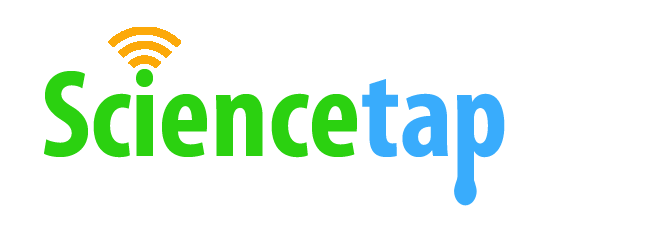
<style>
.page{position:relative;width:653px;height:244px;background:#ffffff}
.page>*{position:absolute;margin:0}
.t1{font:125px "MyriadPro-BoldCond";color:#2bd110}
.t2{font:125px "MyriadPro-BoldCond";color:#39acfc}
</style>
<div class="page">
<p class="t1" style="left:44px;top:69px;width:461px;height:112px">Science<span class="t2">tap</span></p>
</div>
